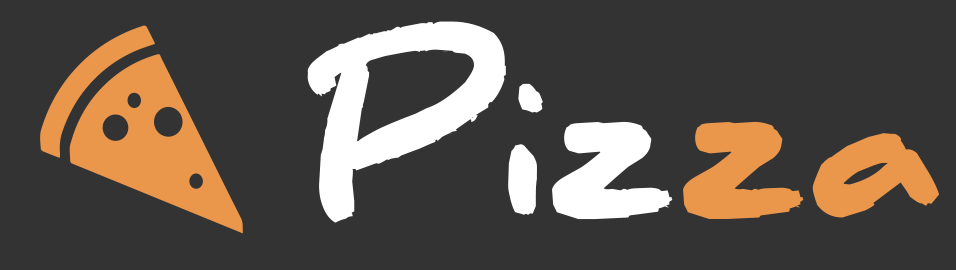
<style>
.page{position:relative;width:956px;height:270px;background:#333333}
.page>*{position:absolute;margin:0}
.t1{font:211.7px "DanielBlack";color:#ffffff}
.t2{font:211.7px "DanielBlack";color:#eb974b}
</style>
<div class="page">
<p class="t1" style="left:307px;top:21px;width:633px;height:202px">Piz<span class="t2">za</span></p>
</div>
